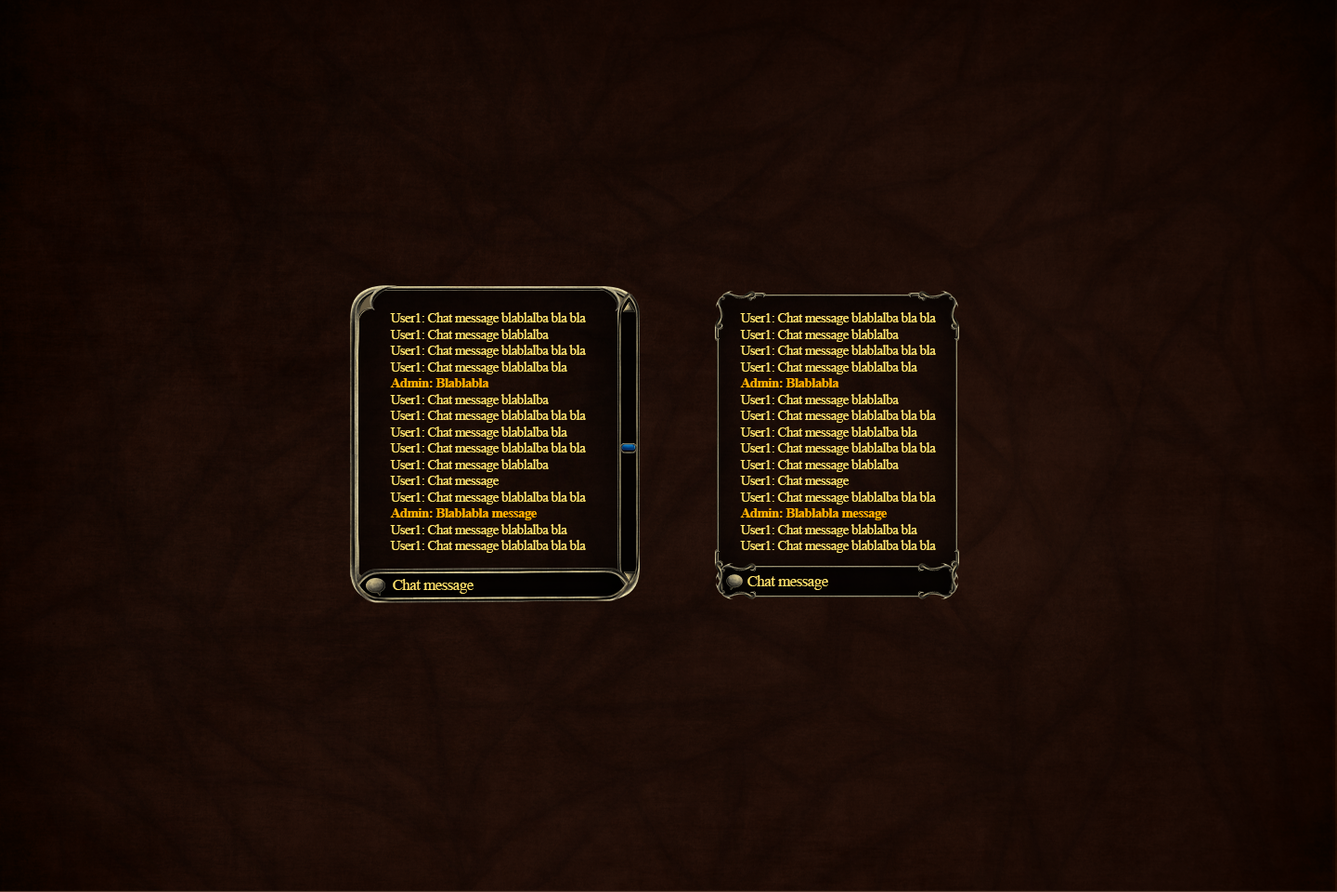
<style>
.page{position:relative;width:1337px;height:892px}
.page>*{position:absolute;margin:0}
.t1{font:13.5px "TimesNewRomanPSMT";letter-spacing:-0.025em;color:#ffe26c}
.t2{font:13.5px "TimesNewRomanPS-BoldMT";letter-spacing:-0.025em;color:#ffae00}
.t3{font:15.5px "TimesNewRomanPSMT";letter-spacing:-0.025em;color:#ffe26c}
</style>
<div class="page">
<p class="t1" style="left:390px;top:312px;width:196px;height:241px">User1: Chat message blablalba bla bla<br>User1: Chat message blablalba <br>User1: Chat message blablalba bla bla<br>User1: Chat message blablalba bla <br><span class="t2">Admin: Blablabla<br></span>User1: Chat message blablalba <br>User1: Chat message blablalba bla bla<br>User1: Chat message blablalba bla<br>User1: Chat message blablalba bla bla<br>User1: Chat message blablalba <br>User1: Chat message <br>User1: Chat message blablalba bla bla<br><span class="t2">Admin: Blablabla message<br></span>User1: Chat message blablalba bla <br>User1: Chat message blablalba bla bla</p>
<p class="t1" style="left:740px;top:312px;width:196px;height:241px">User1: Chat message blablalba bla bla<br>User1: Chat message blablalba <br>User1: Chat message blablalba bla bla<br>User1: Chat message blablalba bla <br><span class="t2">Admin: Blablabla<br></span>User1: Chat message blablalba <br>User1: Chat message blablalba bla bla<br>User1: Chat message blablalba bla<br>User1: Chat message blablalba bla bla<br>User1: Chat message blablalba <br>User1: Chat message <br>User1: Chat message blablalba bla bla<br><span class="t2">Admin: Blablabla message<br></span>User1: Chat message blablalba bla <br>User1: Chat message blablalba bla bla</p>
<p class="t3" style="left:393px;top:579px;width:81px;height:14px">Chat message</p>
<p class="t3" style="left:748px;top:575px;width:80px;height:15px">Chat message</p>
</div>
